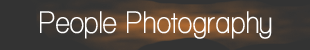
<style>
.page{position:relative;width:310px;height:50px;background:#333333}
.page>*{position:absolute;margin:0}
.t1{font:32px "WalkwayCondensedBold";letter-spacing:0.02em;color:#ffffff;scale:1.12 1}
</style>
<div class="page">
<p class="t1" style="left:40px;top:11px;width:232px;height:28px">People Photography</p>
</div>
